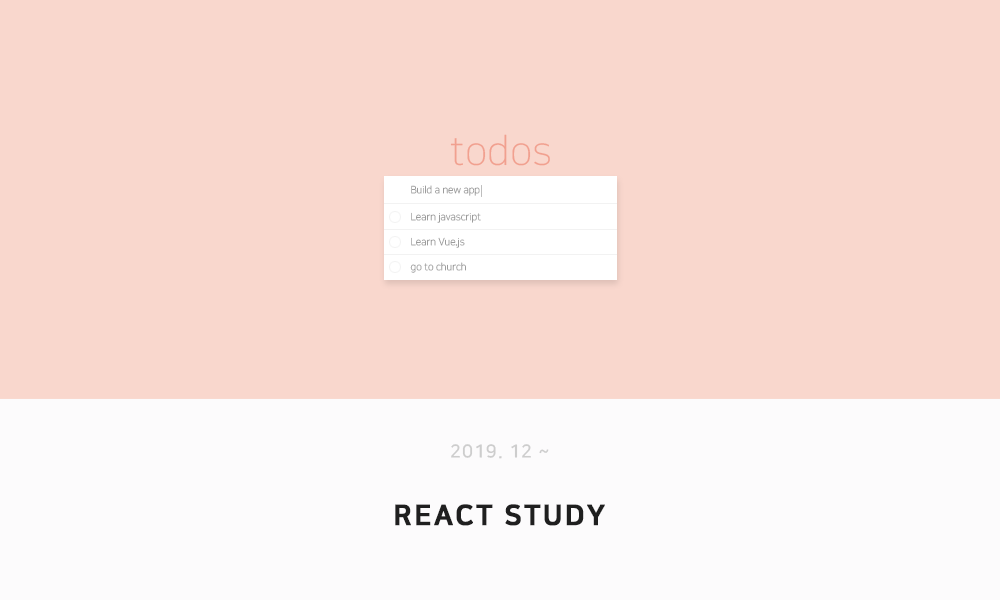
<style>
.page{position:relative;width:1000px;height:600px;background:#f9d7cd}
.page>*{position:absolute;margin:0}
.t1{font:40px "NanumSquareL";color:#f1a08f}
.t2{font:10px "NanumSquareL";color:#9c9c9c}
.t3{font:18px "NanumSquareB";letter-spacing:0.05em;color:#cdcdcd}
.t4{font:28px "NanumSquareEB";letter-spacing:0.06em;color:#1f1f1f;text-transform:uppercase;font-weight:bold}
</style>
<div class="page">
<p class="t1" style="left:450px;top:134px;width:100px;height:32px">todos</p>
<p class="t2" style="left:411px;top:185px;width:69px;height:11px">Build a new app</p>
<p class="t2" style="left:411px;top:212px;width:70px;height:11px">Learn javascript</p>
<p class="t2" style="left:411px;top:237px;width:54px;height:11px">Learn Vue.js</p>
<p class="t2" style="left:410px;top:262px;width:56px;height:11px">go to church</p>
<p class="t3" style="left:451px;top:444px;width:98px;height:15px">2019. 12 ~</p>
<p class="t4" style="left:395px;top:504px;width:210px;height:22px">react study</p>
</div>
